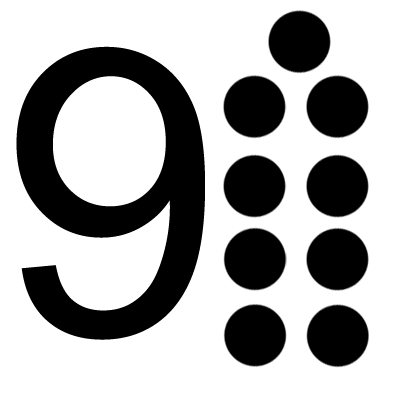
<style>
.page{position:relative;width:400px;height:400px;background:#ffffff}
.page>*{position:absolute;margin:0}
.t1{font:400.2px "ArialMT";color:#000000}
</style>
<div class="page">
<p class="t1" style="left:16px;top:46px;width:189px;height:294px">9</p>
</div>
